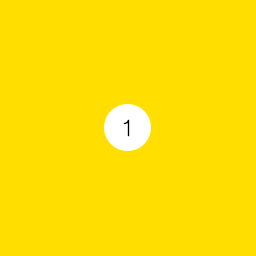
<style>
.page{position:relative;width:256px;height:256px;background:#ffde00}
.page>*{position:absolute;margin:0}
.t1{font:30.6px "Microsoft-Yi-Baiti";color:#000000}
</style>
<div class="page">
<p class="t1" style="left:123px;top:119px;width:7px;height:18px">1</p>
</div>
